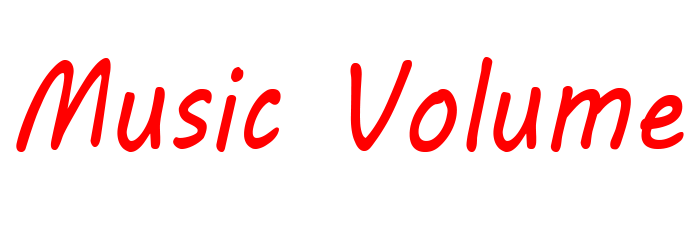
<style>
.page{position:relative;width:700px;height:250px;background:#ffffff}
.page>*{position:absolute;margin:0}
.t1{font:125px "MVBoli";color:#ff0000;scale:0.84 1}
</style>
<div class="page">
<p class="t1" style="left:16px;top:57px;width:668px;height:95px">Music Volume</p>
</div>
